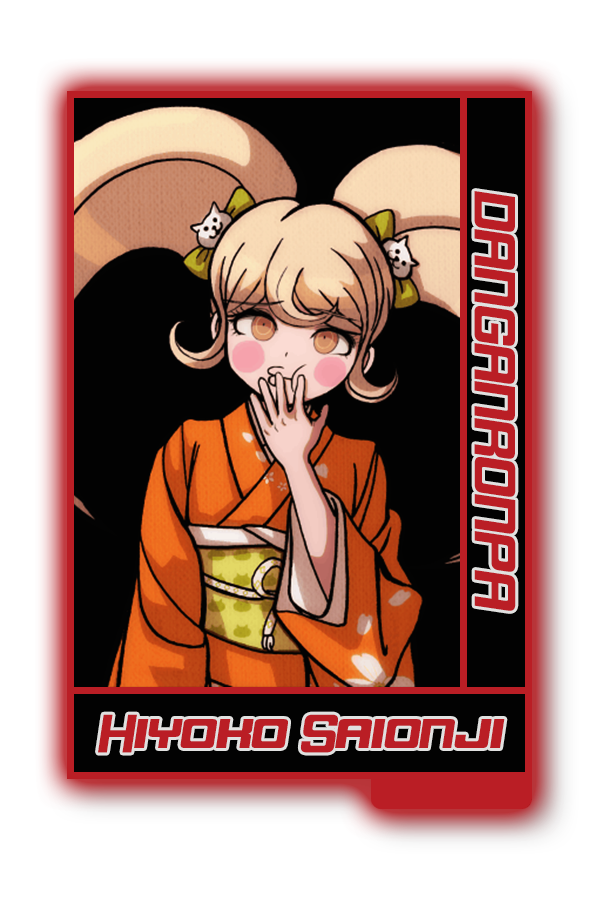
<style>
.page{position:relative;width:600px;height:900px;background:#020202}
.page>*{position:absolute;margin:0}
.t1{font:48.8px "DorBlue";color:#bb2c2e}
.t2{font:45.6px "DorBlue";color:#bb2c2e}
</style>
<div class="page">
<p class="t1" style="left:474px;top:191px;width:42px;height:420px;rotate:90deg">DANGANRONPA</p>
<p class="t2" style="left:98px;top:714px;width:407px;height:39px">Hiyoko Saionji</p>
</div>
